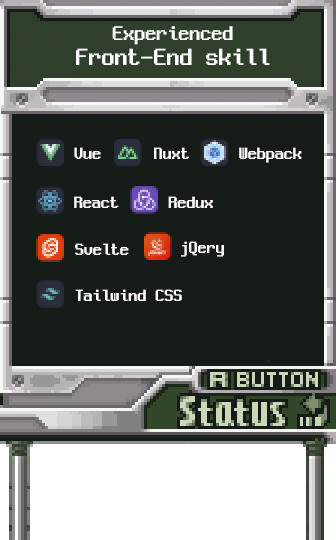
<style>
.page{position:relative;width:336px;height:540px}
.page>*{position:absolute;margin:0}
.t1{font:26px/30px "NeoDunggeunmo-Regular";color:#ffffff}
.t2{font:22px/22px "NeoDunggeunmo-Regular";color:#ffffff}
.t3{font:18px "NeoDunggeunmo-Regular";color:#ffffff}
</style>
<div class="page">
<p class="t1" style="left:76px;top:26px;width:194px;height:39px;text-align:center"><span class="t2">Experienced<br></span>Front-End skill</p>
<p class="t3" style="left:74px;top:147px;width:27px;height:12px">Vue</p>
<p class="t3" style="left:154px;top:147px;width:35px;height:12px">Nuxt</p>
<p class="t3" style="left:239px;top:147px;width:63px;height:16px">Webpack</p>
<p class="t3" style="left:74px;top:196px;width:45px;height:12px">React</p>
<p class="t3" style="left:168px;top:196px;width:45px;height:12px">Redux</p>
<p class="t3" style="left:75px;top:243px;width:54px;height:12px">Svelte</p>
<p class="t3" style="left:181px;top:241px;width:43px;height:16px">jQery</p>
<p class="t3" style="left:75px;top:289px;width:107px;height:12px">Tailwind CSS</p>
</div>
